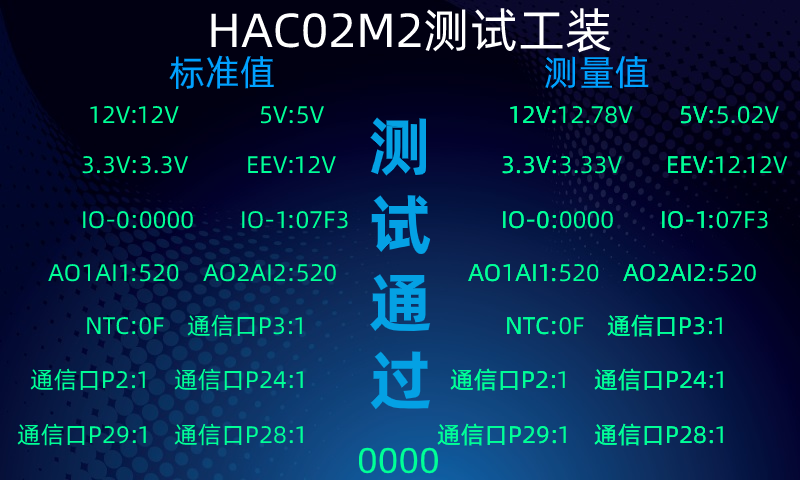
<style>
.page{position:relative;width:800px;height:480px}
.page>*{position:absolute;margin:0}
.t1{font:48px "AlibabaPuHuiTi-Regular";color:#ffffff}
.t2{font:36px "AlibabaPuHuiTi-Regular";color:#00a1ff}
.t3{font:24px "AlibabaPuHuiTi-Regular";color:#00ff97}
.t4{font:65px "AlibabaPuHuiTi-Bold";color:#04a1e4}
.t5{font:36px "AlibabaPuHuiTi-Regular";color:#00ff97}
</style>
<div class="page">
<p class="t1" style="left:211px;top:8px;width:400px;height:45px">HAC02M2测试工装</p>
<p class="t2" style="left:169px;top:55px;width:480px;height:35px">标准值                             测量值</p>
<p class="t3" style="left:90px;top:106px;width:89px;height:18px">12V:12V</p>
<p class="t3" style="left:261px;top:106px;width:63px;height:18px">5V:5V</p>
<p class="t3" style="left:510px;top:106px;width:46px;height:18px">12V:</p>
<p class="t3" style="left:510px;top:106px;width:123px;height:18px">12V:12.78V</p>
<p class="t3" style="left:681px;top:106px;width:32px;height:18px">5V:</p>
<p class="t3" style="left:681px;top:106px;width:98px;height:18px">5V:5.02V</p>
<p class="t4" style="left:370px;top:117px;width:61px;height:293px">测<br>试<br>通<br>过</p>
<p class="t3" style="left:82px;top:156px;width:107px;height:18px">3.3V:3.3V</p>
<p class="t3" style="left:248px;top:156px;width:88px;height:18px">EEV:12V</p>
<p class="t3" style="left:502px;top:156px;width:54px;height:18px">3.3V:</p>
<p class="t3" style="left:502px;top:156px;width:120px;height:18px">3.3V:3.33V</p>
<p class="t3" style="left:668px;top:156px;width:45px;height:18px">EEV:</p>
<p class="t3" style="left:668px;top:156px;width:120px;height:18px">EEV:12.12V</p>
<p class="t3" style="left:83px;top:211px;width:110px;height:18px">IO-0:0000</p>
<p class="t3" style="left:242px;top:211px;width:106px;height:18px">IO-1:07F3</p>
<p class="t3" style="left:503px;top:211px;width:53px;height:18px">IO-0:</p>
<p class="t3" style="left:503px;top:211px;width:110px;height:18px">IO-0:0000</p>
<p class="t3" style="left:662px;top:211px;width:51px;height:18px">IO-1:</p>
<p class="t3" style="left:662px;top:211px;width:106px;height:18px">IO-1:07F3</p>
<p class="t3" style="left:48px;top:264px;width:131px;height:18px">AO1AI1:520</p>
<p class="t3" style="left:203px;top:264px;width:133px;height:18px">AO2AI2:520</p>
<p class="t3" style="left:468px;top:264px;width:88px;height:18px">AO1AI1:</p>
<p class="t3" style="left:468px;top:264px;width:131px;height:18px">AO1AI1:520</p>
<p class="t3" style="left:623px;top:264px;width:90px;height:18px">AO2AI2:</p>
<p class="t3" style="left:623px;top:264px;width:133px;height:18px">AO2AI2:520</p>
<p class="t3" style="left:87px;top:317px;width:77px;height:18px">NTC:0F</p>
<p class="t3" style="left:187px;top:314px;width:115px;height:23px">通信口P3:1</p>
<p class="t3" style="left:507px;top:317px;width:49px;height:18px">NTC:</p>
<p class="t3" style="left:507px;top:317px;width:77px;height:18px">NTC:0F</p>
<p class="t3" style="left:607px;top:314px;width:106px;height:23px">通信口P3:</p>
<p class="t3" style="left:607px;top:314px;width:115px;height:23px">通信口P3:1</p>
<p class="t3" style="left:30px;top:368px;width:115px;height:23px">通信口P2:1</p>
<p class="t3" style="left:174px;top:368px;width:129px;height:23px">通信口P24:1</p>
<p class="t3" style="left:450px;top:368px;width:106px;height:23px">通信口P2:</p>
<p class="t3" style="left:450px;top:368px;width:115px;height:23px">通信口P2:1</p>
<p class="t3" style="left:594px;top:368px;width:119px;height:23px">通信口P24:</p>
<p class="t3" style="left:594px;top:368px;width:129px;height:23px">通信口P24:1</p>
<p class="t3" style="left:17px;top:423px;width:129px;height:23px">通信口P29:1</p>
<p class="t3" style="left:174px;top:423px;width:129px;height:23px">通信口P28:1</p>
<p class="t3" style="left:437px;top:423px;width:119px;height:23px">通信口P29:</p>
<p class="t3" style="left:437px;top:423px;width:129px;height:23px">通信口P29:1</p>
<p class="t3" style="left:594px;top:423px;width:119px;height:23px">通信口P28:</p>
<p class="t3" style="left:594px;top:423px;width:129px;height:23px">通信口P28:1</p>
<p class="t5" style="left:358px;top:447px;width:80px;height:27px">0000</p>
</div>
